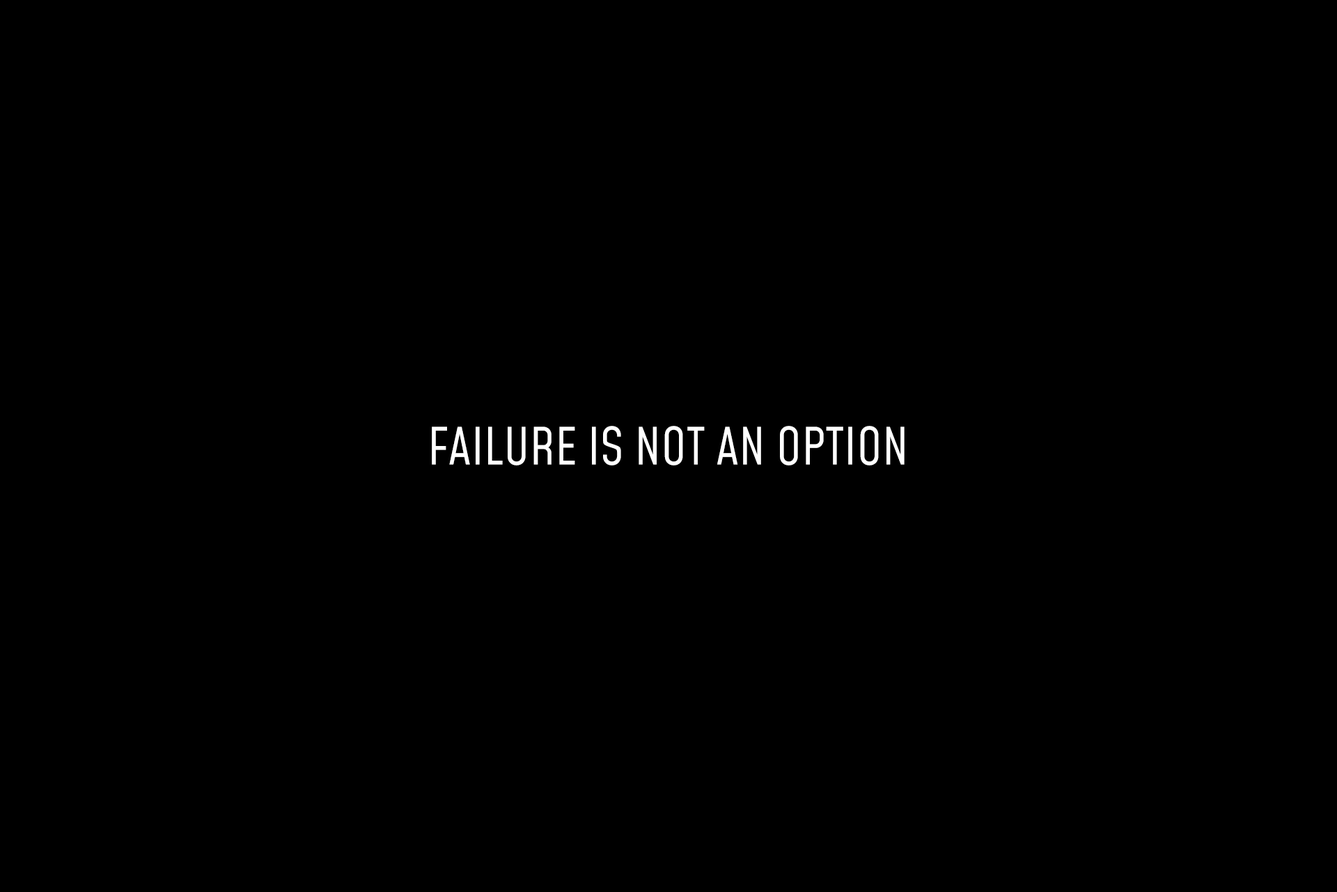
<style>
.page{position:relative;width:1337px;height:892px;background:#000000}
.page>*{position:absolute;margin:0}
.t1{font:50.2px "Mohave-Regular";color:#ffffff;text-transform:uppercase}
</style>
<div class="page">
<p class="t1" style="left:432px;top:426px;width:473px;height:39px">Failure Is Not An Option</p>
</div>
